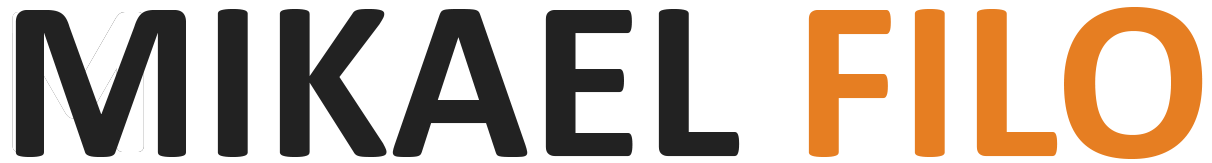
<style>
.page{position:relative;width:1212px;height:163px;background:#ffffff}
.page>*{position:absolute;margin:0}
.t1{font:231.2px "Calibri-Bold";color:#222222}
.t2{font:231.2px "Calibri-Bold";color:#e67e22}
</style>
<div class="page">
<p class="t1" style="left:15px;top:7px;width:1188px;height:152px">MIKAEL <span class="t2">FILO</span></p>
</div>
